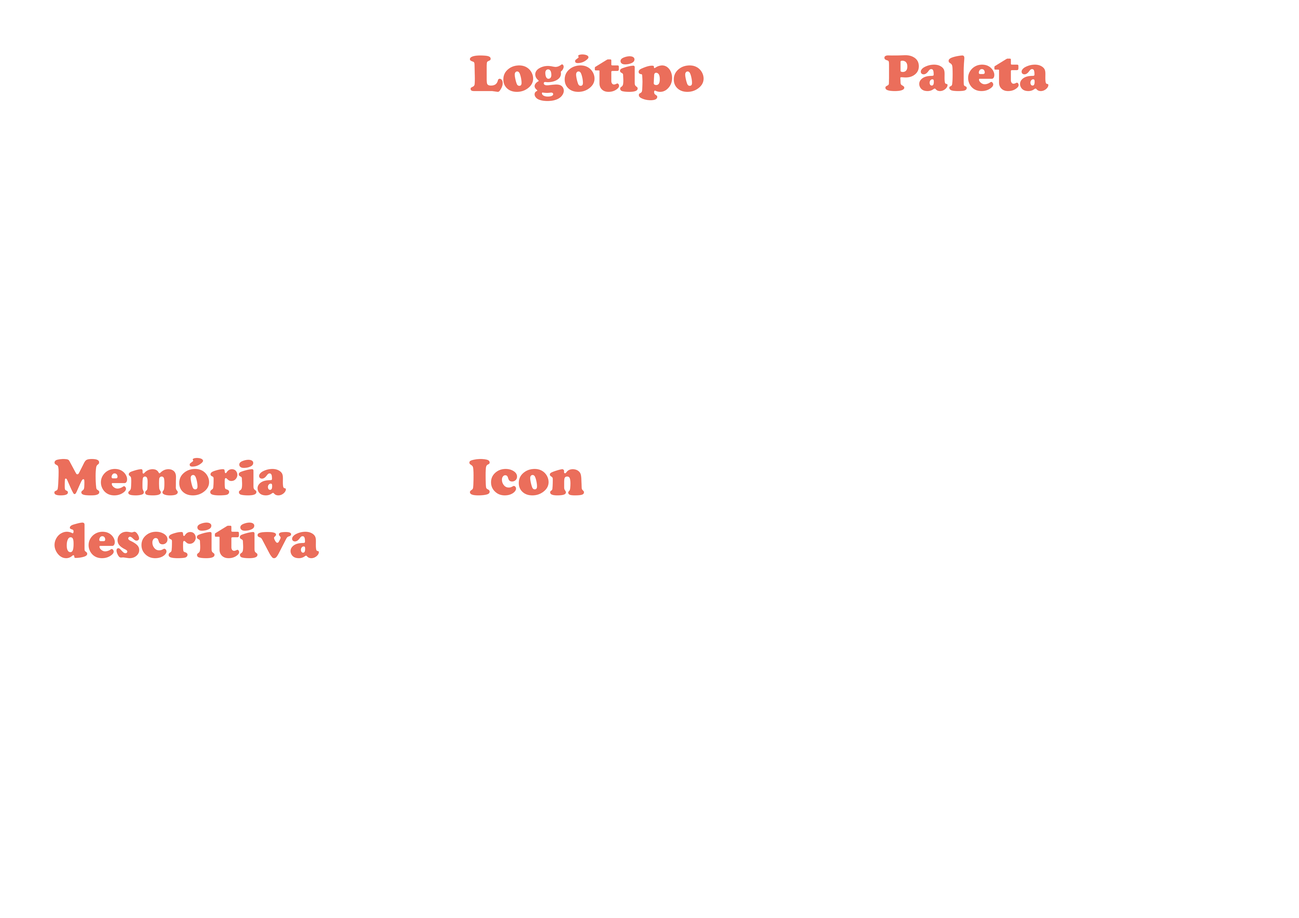
<style>
.page{position:relative;width:1299px;height:918px;background:#ffffff}
.page>*{position:absolute;margin:0}
.t1{font:52.4px "CooperBlack";color:#eb6e5b}
</style>
<div class="page">
<p class="t1" style="left:470px;top:54px;width:234px;height:47px">Logótipo</p>
<p class="t1" style="left:884px;top:55px;width:164px;height:36px">Paleta</p>
<p class="t1" style="left:54px;top:458px;width:265px;height:100px">Memória<br>descritiva</p>
<p class="t1" style="left:469px;top:459px;width:115px;height:37px">Icon</p>
</div>
